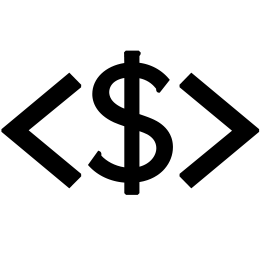
<style>
.page{position:relative;width:260px;height:260px;background:#ffffff}
.page>*{position:absolute;margin:0}
.t1{font:202.4px "Consolas";color:#000000;font-weight:bold}
.t2{font:202.4px "InconsolataForPowerline";color:#000000;font-weight:bold}
</style>
<div class="page">
<p class="t1" style="left:1px;top:50px;width:259px;height:145px">&lt;<span class="t2">$</span>&gt;</p>
</div>
